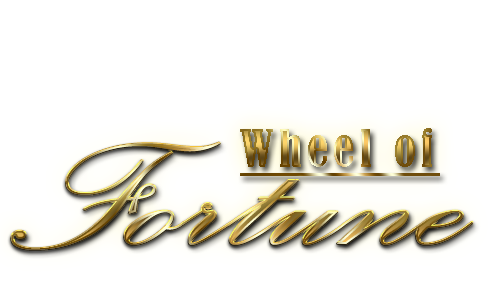
<style>
.page{position:relative;width:500px;height:300px;background:#ffffff}
.page>*{position:absolute;margin:0}
.t1{font:48px "BernardMT-Condensed";letter-spacing:0.1em;text-decoration:underline}
.t2{font:192px "PalaceScriptMT";scale:1.25 1}
</style>
<div class="page">
<p class="t1" style="left:240px;top:128px;width:200px;height:48px">Wheel of</p>
<p class="t2" style="left:11px;top:142px;width:462px;height:108px">Fortune</p>
<p class="t2" style="left:11px;top:142px;width:462px;height:108px">Fortune</p>
</div>
